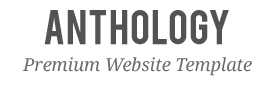
<style>
.page{position:relative;width:278px;height:86px;background:#ffffff}
.page>*{position:absolute;margin:0}
.t1{font:38px "Bebas";color:#535353}
.t2{font:18px "DroidSerif-Italic";color:#6a6a6a}
</style>
<div class="page">
<p class="t1" style="left:44px;top:10px;width:185px;height:35px">Anthology</p>
<p class="t2" style="left:22px;top:57px;width:230px;height:19px">Premium Website Template</p>
</div>
